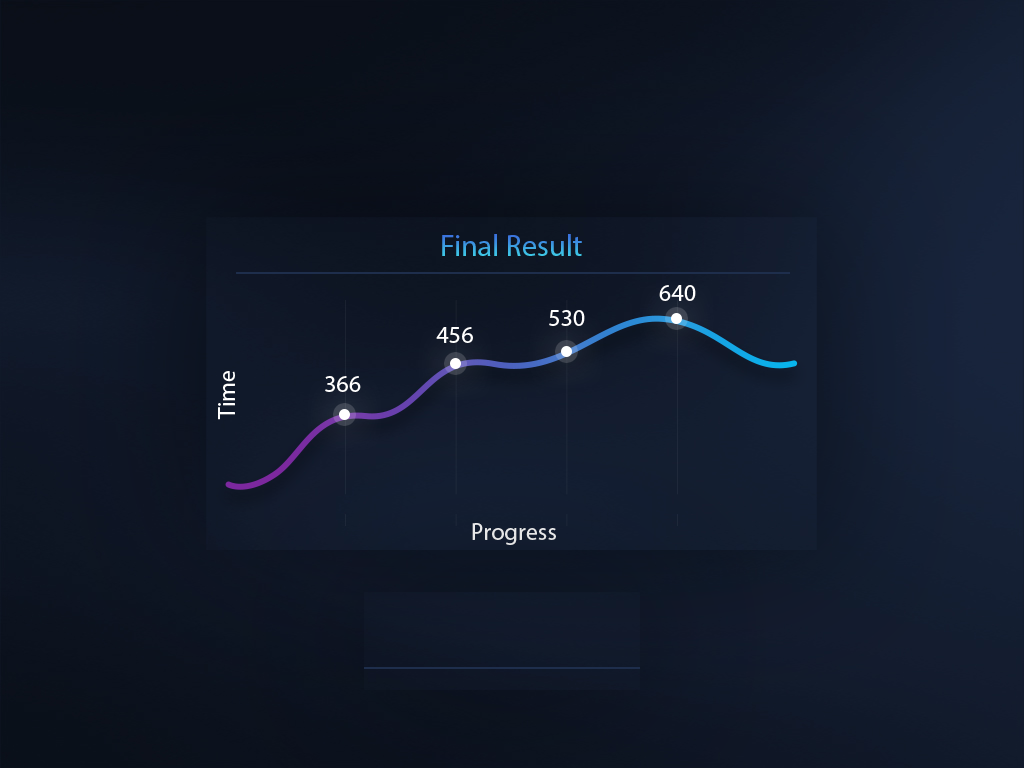
<style>
.page{position:relative;width:1024px;height:768px}
.page>*{position:absolute;margin:0}
.t1{font:30.1px "MyriadPro-Regular"}
.t2{font:24px "MyriadPro-Regular";color:#ffffff;text-transform:uppercase}
.t3{font:24px "MyriadPro-Regular";color:#ffffff}
.t4{font:24px "MyriadPro-Regular";color:#e7e8e9}
</style>
<div class="page">
<p class="t1" style="left:442px;top:234px;width:140px;height:22px">Final Result</p>
<p class="t2" style="left:659px;top:285px;width:37px;height:16px">640</p>
<p class="t2" style="left:549px;top:310px;width:36px;height:16px">530</p>
<p class="t2" style="left:436px;top:327px;width:37px;height:16px">456</p>
<p class="t3" style="left:218px;top:371px;width:17px;height:49px;rotate:-90deg">Time</p>
<p class="t2" style="left:325px;top:376px;width:36px;height:16px">366</p>
<p class="t4" style="left:472px;top:523px;width:84px;height:22px">Progress</p>
</div>
